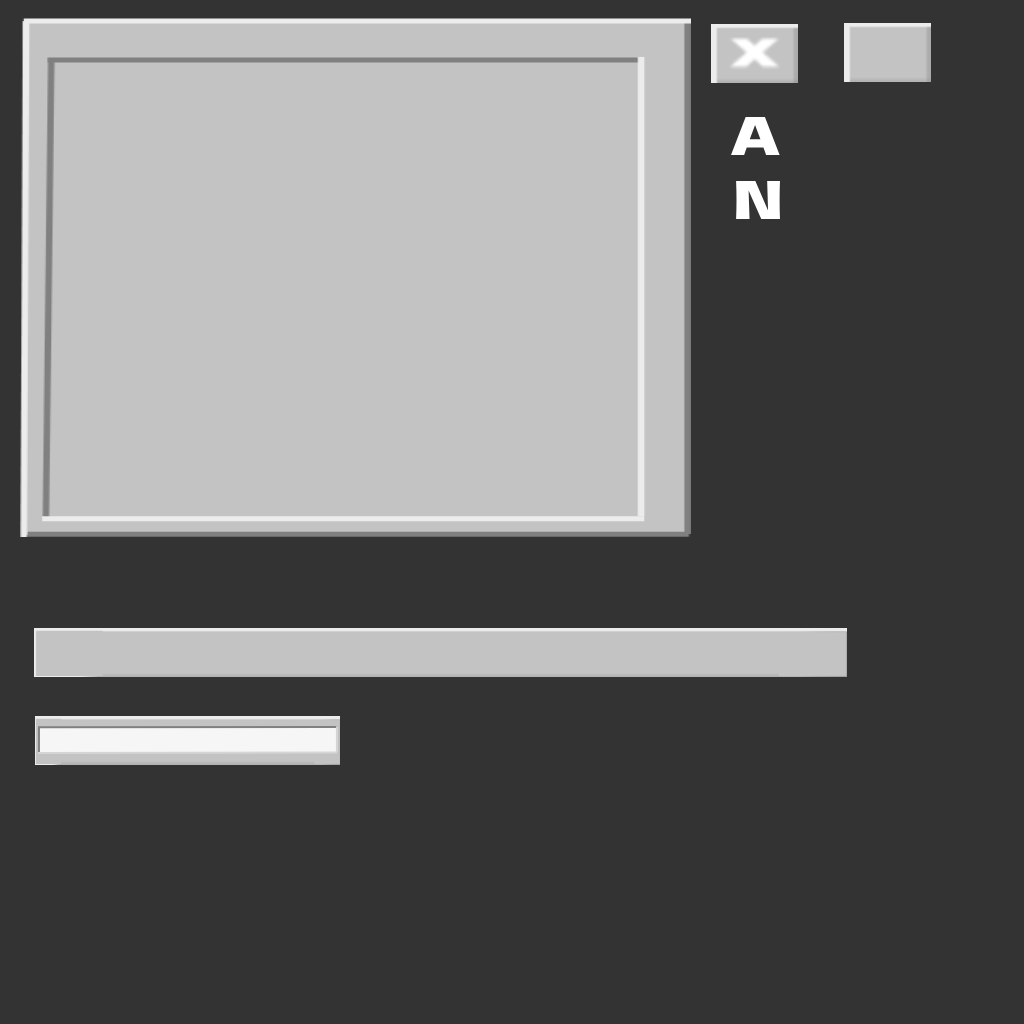
<style>
.page{position:relative;width:1024px;height:1024px;background:#333333}
.page>*{position:absolute;margin:0}
.t1{font:52.3px "DelaGothicOne-Regular";color:#ffffff}
</style>
<div class="page">
<p class="t1" style="left:731px;top:117px;width:49px;height:38px">A</p>
<p class="t1" style="left:736px;top:181px;width:44px;height:38px">N</p>
</div>
